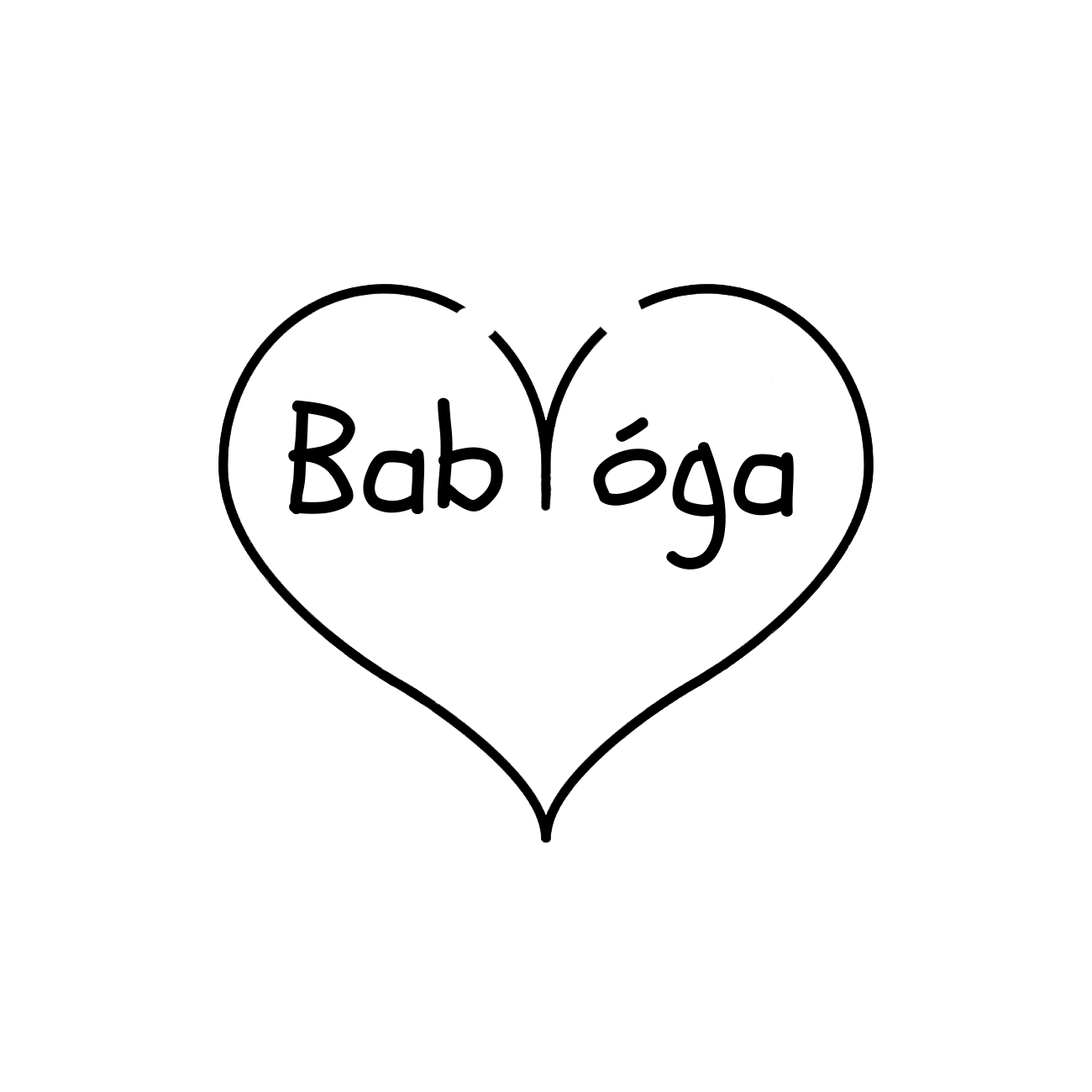
<style>
.page{position:relative;width:1092px;height:1092px;background:#ffffff}
.page>*{position:absolute;margin:0}
.t1{font:150.1px "Schoolbell";color:#000000}
.t2{font:148.1px "Schoolbell";color:#000000}
</style>
<div class="page">
<p class="t1" style="left:288px;top:397px;width:215px;height:118px">Bab</p>
<p class="t2" style="left:593px;top:417px;width:201px;height:153px">óga</p>
</div>
